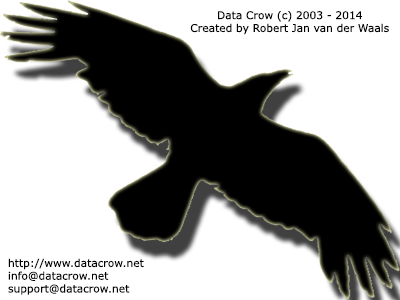
<style>
.page{position:relative;width:400px;height:300px;background:#ffffff}
.page>*{position:absolute;margin:0}
.t1{font:10.7px "Verdana";color:#000000}
</style>
<div class="page">
<p class="t1" style="left:190px;top:11px;width:199px;height:24px;text-align:center">Data Crow (c) 2003 - 2014<br>Created by Robert Jan van der Waals</p>
<p class="t1" style="left:8px;top:258px;width:136px;height:37px">http://www.datacrow.net<br>info@datacrow.net<br>support@datacrow.net</p>
</div>
